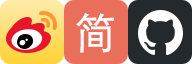
<style>
.page{position:relative;width:192px;height:64px;background:#ea6f5a}
.page>*{position:absolute;margin:0}
.t1{font:41.7px "STHeitiSC-Light";color:#ffffff;font-weight:bold}
</style>
<div class="page">
<p class="t1" style="left:76px;top:13px;width:38px;height:40px">简</p>
</div>
